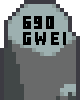
<style>
.page{position:relative;width:80px;height:100px;background:#696a6a}
.page>*{position:absolute;margin:0}
.t1{font:18.2px "MinecraftTen";letter-spacing:0.2em;color:#000000;scale:0.86 1}
</style>
<div class="page">
<p class="t1" style="left:23px;top:16px;width:43px;height:29px">690<br>gwei</p>
</div>
